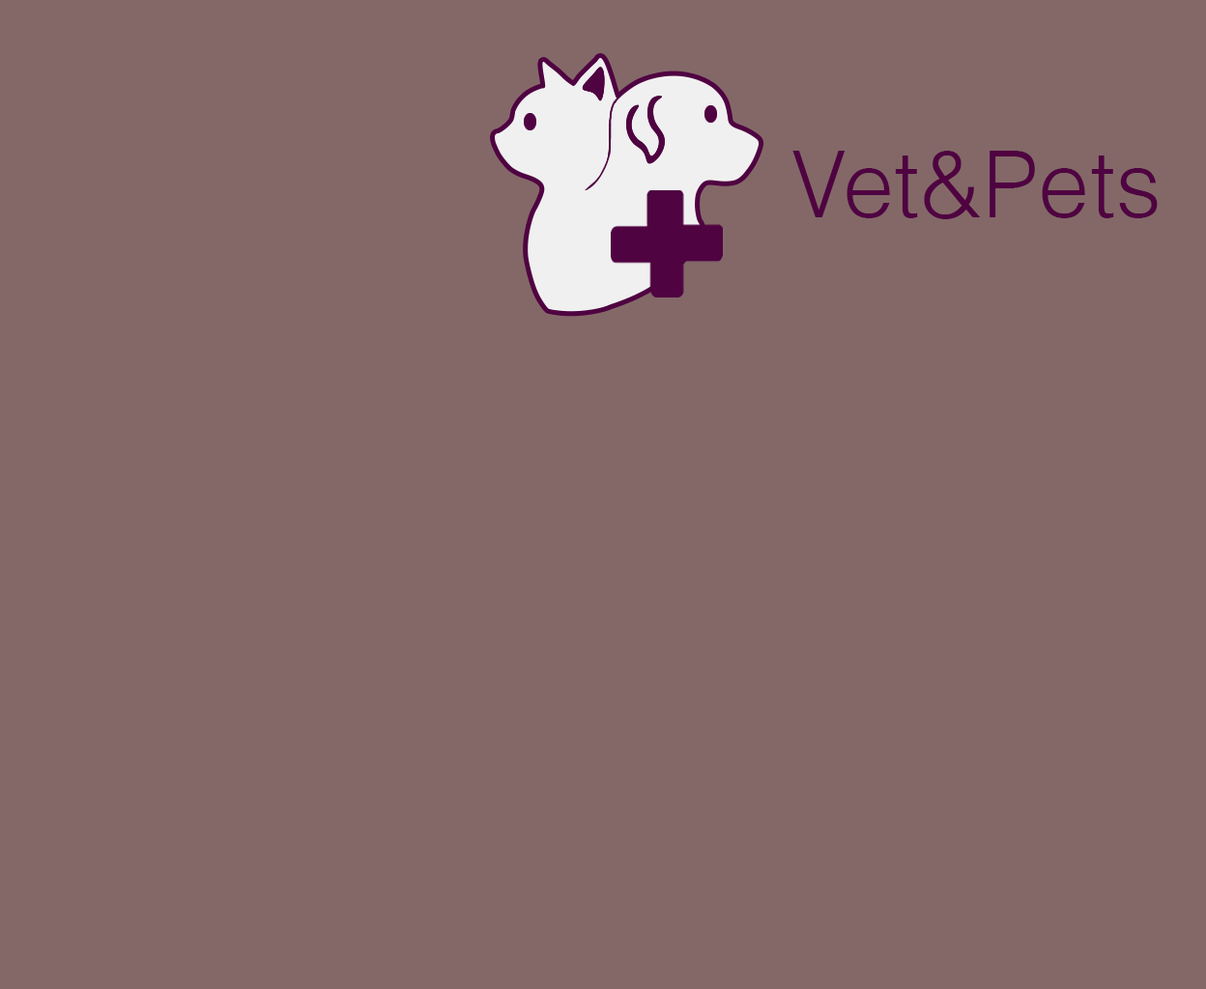
<style>
.page{position:relative;width:1206px;height:989px;background:#846868}
.page>*{position:absolute;margin:0}
.t1{font:92.7px "Helvetica-Light";color:#4f0341}
</style>
<div class="page">
<p class="t1" style="left:792px;top:151px;width:365px;height:68px">Vet&amp;Pets</p>
</div>
